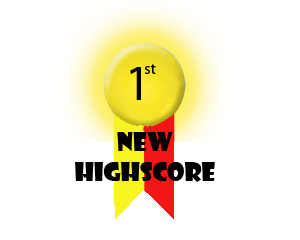
<style>
.page{position:relative;width:300px;height:240px;background:#ffffff}
.page>*{position:absolute;margin:0}
.t1{font:25px "ShowcardGothic-Reg";color:#000000}
</style>
<div class="page">
<p class="t1" style="left:75px;top:132px;width:140px;height:50px;text-align:center">new<br>HIGHSCORE</p>
</div>
